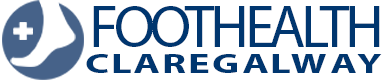
<style>
.page{position:relative;width:384px;height:80px;background:#ffffff}
.page>*{position:absolute;margin:0}
.t1{font:59.5px "MyriadPro-Regular";letter-spacing:-0.075em;color:#00366f;text-transform:uppercase}
.t2{font:27.1px "MyriadPro-Bold";letter-spacing:-0.075em;color:#00366f;text-transform:uppercase;scale:1.49 1}
</style>
<div class="page">
<p class="t1" style="left:93px;top:6px;width:287px;height:41px">FOOTHEALTH</p>
<p class="t2" style="left:86px;top:54px;width:296px;height:19px">C L A R E G A L W A Y</p>
</div>
